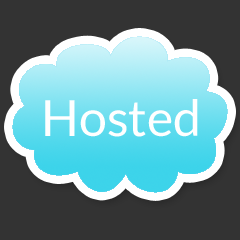
<style>
.page{position:relative;width:240px;height:240px;background:#333333}
.page>*{position:absolute;margin:0}
.t1{font:50px "Lato-Regular";color:#ffffff}
</style>
<div class="page">
<p class="t1" style="left:45px;top:99px;width:153px;height:38px">Hosted</p>
</div>
